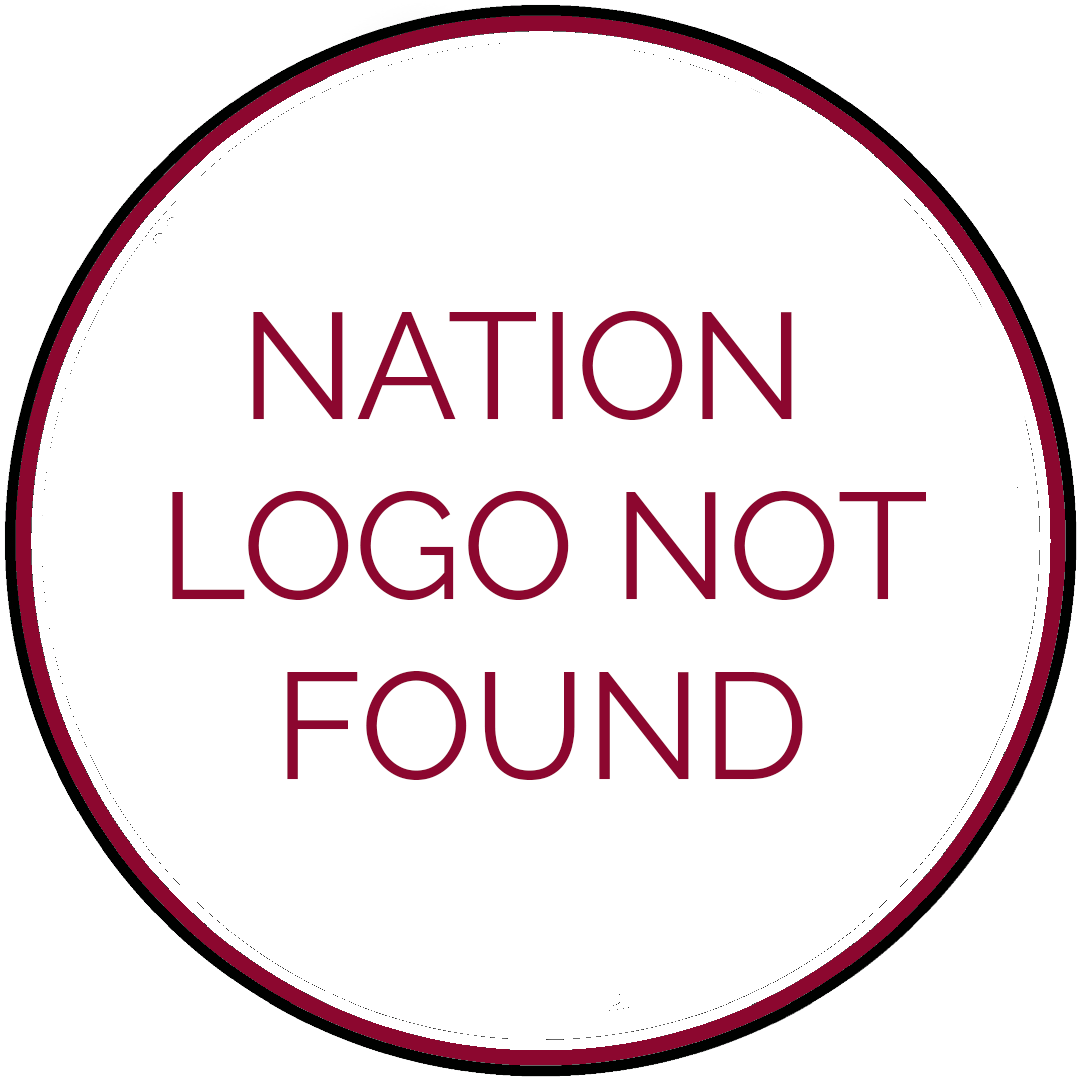
<style>
.page{position:relative;width:1080px;height:1080px;background:#ffffff}
.page>*{position:absolute;margin:0}
.t1{font:150px "RalewayRoman-Regular";color:#8c072f}
</style>
<div class="page">
<p class="t1" style="left:172px;top:311px;width:754px;height:469px;text-align:center">NATION <br>LOGO NOT<br>FOUND</p>
</div>
